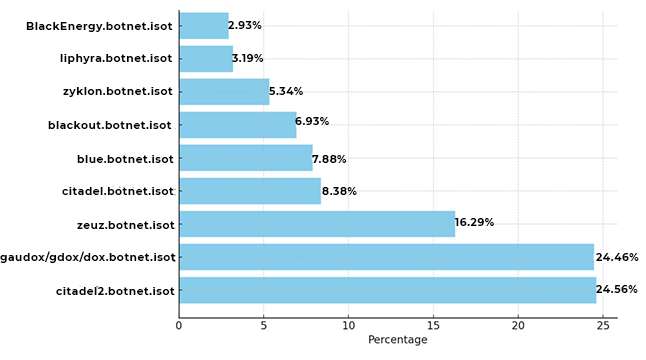
<style>
.page{position:relative;width:646px;height:360px;background:#ffffff}
.page>*{position:absolute;margin:0}
.t1{font:10.7px "Montserrat-Bold";letter-spacing:0.05em;color:#000000}
</style>
<div class="page">
<p class="t1" style="left:26px;top:22px;width:147px;height:10px">BlackEnergy.botnet.isot</p>
<p class="t1" style="left:228px;top:21px;width:34px;height:8px">2.93%</p>
<p class="t1" style="left:60px;top:54px;width:112px;height:10px">liphyra.botnet.isot</p>
<p class="t1" style="left:232px;top:54px;width:32px;height:8px">3.19%</p>
<p class="t1" style="left:63px;top:87px;width:110px;height:10px">zyklon.botnet.isot</p>
<p class="t1" style="left:269px;top:87px;width:34px;height:8px">5.34%</p>
<p class="t1" style="left:48px;top:121px;width:124px;height:8px">blackout.botnet.isot</p>
<p class="t1" style="left:295px;top:117px;width:34px;height:8px">6.93%</p>
<p class="t1" style="left:77px;top:155px;width:97px;height:8px">blue.botnet.isot</p>
<p class="t1" style="left:312px;top:155px;width:35px;height:8px">7.88%</p>
<p class="t1" style="left:62px;top:187px;width:112px;height:8px">citadel.botnet.isot</p>
<p class="t1" style="left:322px;top:187px;width:35px;height:8px">8.38%</p>
<p class="t1" style="left:77px;top:221px;width:98px;height:8px">zeuz.botnet.isot</p>
<p class="t1" style="left:455px;top:218px;width:39px;height:8px">16.29%</p>
<p class="t1" style="left:0px;top:251px;width:176px;height:12px">gaudox/gdox/dox.botnet.isot</p>
<p class="t1" style="left:596px;top:253px;width:43px;height:8px">24.46%</p>
<p class="t1" style="left:56px;top:287px;width:119px;height:8px">citadel2.botnet.isot</p>
<p class="t1" style="left:596px;top:285px;width:42px;height:8px">24.56%</p>
</div>
